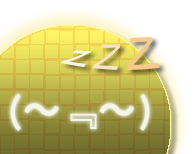
<style>
.page{position:relative;width:193px;height:154px}
.page>*{position:absolute;margin:0}
.t1{font:36px "Gautami";color:#fbf4e9}
.t2{font:36px "Gautami";color:#f9e3c4}
.t3{font:46px "Gautami";color:#f6ca8a}
.t4{font:41.1px "AdobeHeitiStd-Regular";color:#f3f5e6;font-weight:bold;scale:0.89 1}
.t5{font:41.1px "Gautami";color:#f3f5e6;font-weight:bold;scale:0.89 1}
</style>
<div class="page">
<p class="t1" style="left:61px;top:37px;width:99px;height:33px;rotate:-2deg">z <span class="t2">Z </span><span class="t3">Z</span></p>
<p class="t4" style="left:10px;top:93px;width:140px;height:38px"><span class="t5">(</span>～﹃～<span class="t5">)</span></p>
</div>
